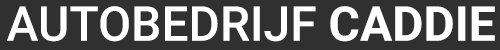
<style>
.page{position:relative;width:500px;height:50px;background:#303030}
.page>*{position:absolute;margin:0}
.t1{font:47.9px "Roboto-Medium";color:#ffffff}
.t2{font:47.9px "Roboto-Bold";color:#ffffff}
</style>
<div class="page">
<p class="t1" style="left:7px;top:6px;width:488px;height:36px">AUTOBEDRIJF <span class="t2">CADDIE</span></p>
</div>
